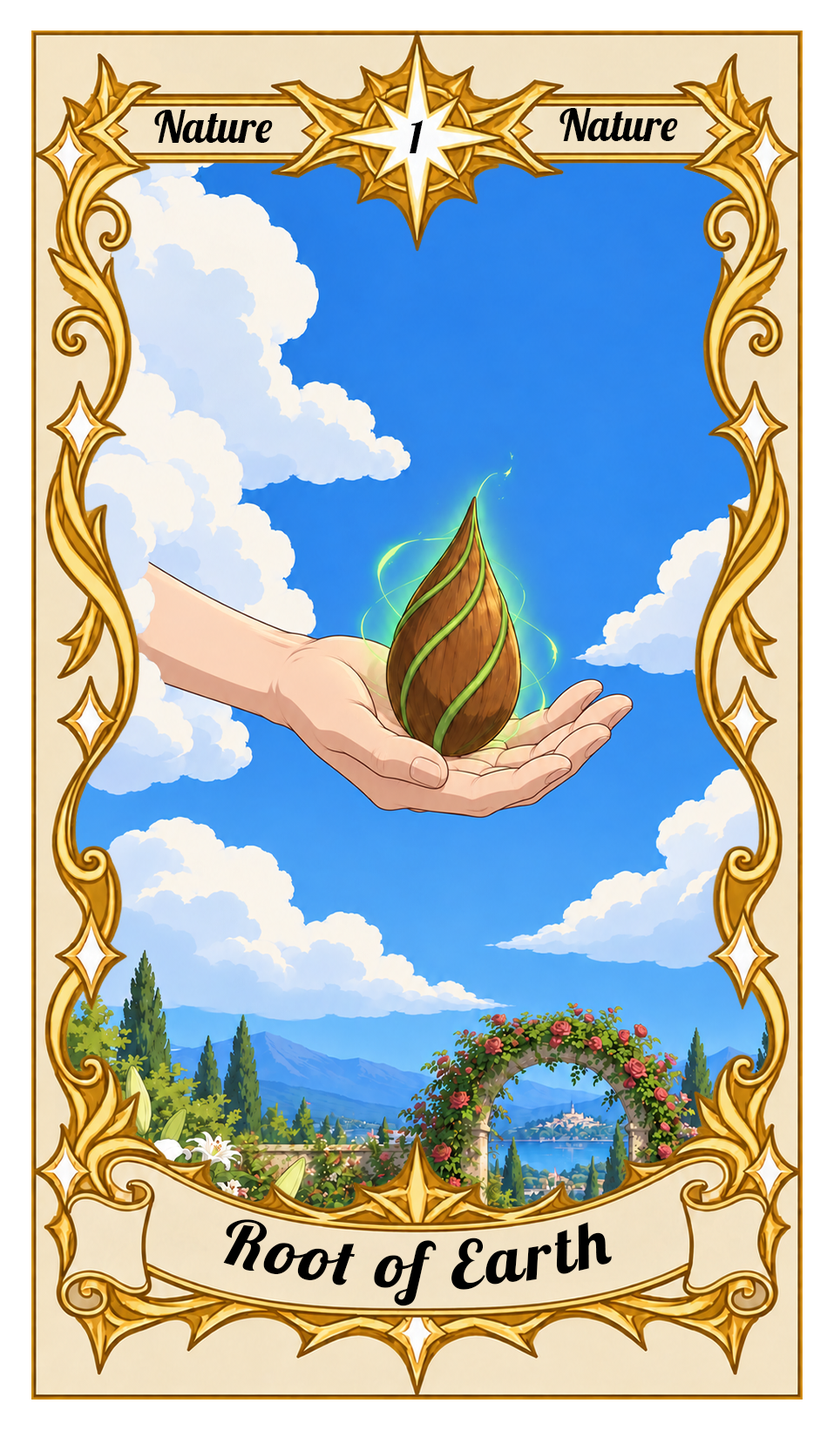
<style>
.page{position:relative;width:834px;height:1430px}
.page>*{position:absolute;margin:0}
.t1{font:43.6px "Lobster-Regular";color:#000000}
.t2{font:65.3px "Lobster-Regular";letter-spacing:0.05em;color:#000000}
</style>
<div class="page">
<p class="t1" style="left:154px;top:110px;width:119px;height:33px">Nature</p>
<p class="t1" style="left:559px;top:108px;width:119px;height:33px">Nature</p>
<p class="t1" style="left:409px;top:120px;width:14px;height:33px">1</p>
<p class="t2" style="left:223px;top:1220px;width:389px;height:87px">Root of Earth</p>
</div>
